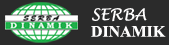
<style>
.page{position:relative;width:169px;height:45px;background:#2b2b2b}
.page>*{position:absolute;margin:0}
.t1{font:15.9px "LucidaHandwriting-Italic";color:#fffefe}
.t2{font:15.9px "TimesNewRomanPS-BoldMT";color:#fffefe}
</style>
<div class="page">
<p class="t1" style="left:92px;top:8px;width:55px;height:14px">SERBA</p>
<p class="t2" style="left:91px;top:25px;width:75px;height:12px">DINAMIK</p>
</div>
